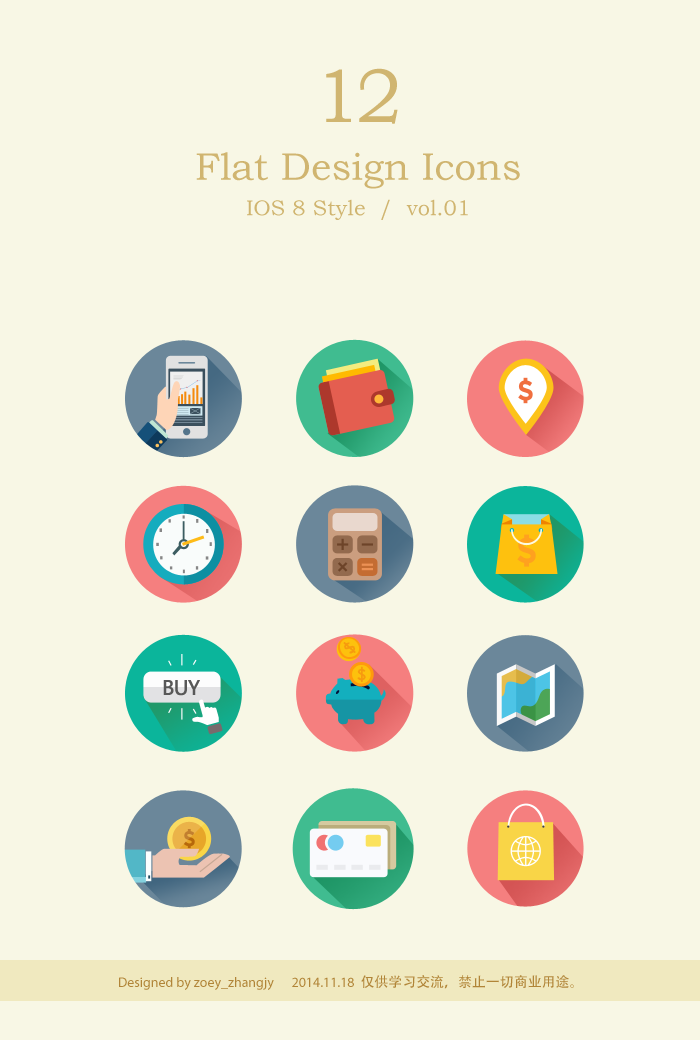
<style>
.page{position:relative;width:700px;height:1040px;background:#f8f7e5}
.page>*{position:absolute;margin:0}
.t1{font:21.9px/35.5px "BookmanOldStyle";color:#d0b570}
.t2{font:77px/57.8px "BookmanOldStyle";letter-spacing:-0.075em;color:#d0b570}
.t3{font:38.5px/57.8px "BookmanOldStyle";color:#d0b570}
.t4{font:15.6px "STHeitiSC-Light";color:#f79b0e;font-weight:bold}
.t5{font:15.5px "STHeitiSC-Light";color:#f79b0e;font-weight:bold}
.t6{font:19.5px "MicrosoftYaHei";letter-spacing:-0.05em;color:#585858;font-weight:bold}
.t7{font:14px "MyriadPro-Regular";color:#b18538}
.t8{font:14px "AdobeHeitiStd-Regular";color:#b18538}
</style>
<div class="page">
<p class="t1" style="left:196px;top:68px;width:324px;height:152px;text-align:center"><span class="t2">12<br></span><span class="t3">Flat Design Icons<br></span>IOS 8 Style  /  vol.01</p>
<p class="t4" style="left:343px;top:642px;width:13px;height:12px;rotate:-48deg">$</p>
<p class="t5" style="left:357px;top:666px;width:9px;height:16px">$</p>
<p class="t6" style="left:163px;top:680px;width:37px;height:16px">BUY</p>
<p class="t7" style="left:119px;top:975px;width:455px;height:15px">Designed by zoey_zhangjy      2014.11.18  <span class="t8">仅供学习交流，禁止一切商业用途。</span></p>
</div>
